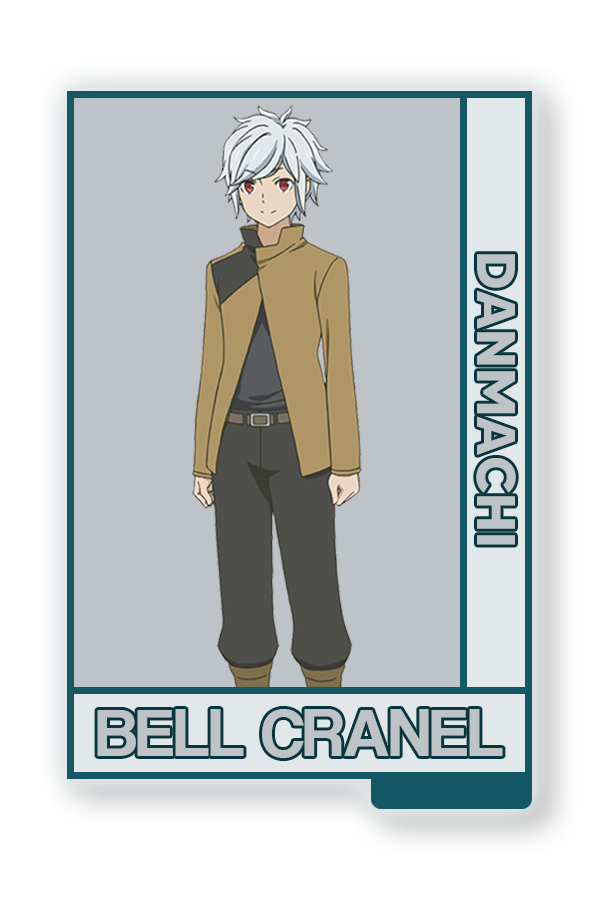
<style>
.page{position:relative;width:600px;height:900px;background:#bdc3c6}
.page>*{position:absolute;margin:0}
.t1{font:54.4px "MADETOMMY-Bold";color:#bdc3c6}
.t2{font:70px "CoolveticaRg-Regular";color:#bdc3c6}
</style>
<div class="page">
<p class="t1" style="left:476px;top:254px;width:40px;height:291px;rotate:90deg">DANMACHI</p>
<p class="t2" style="left:97px;top:709px;width:406px;height:49px">BELL CRANEL</p>
</div>
